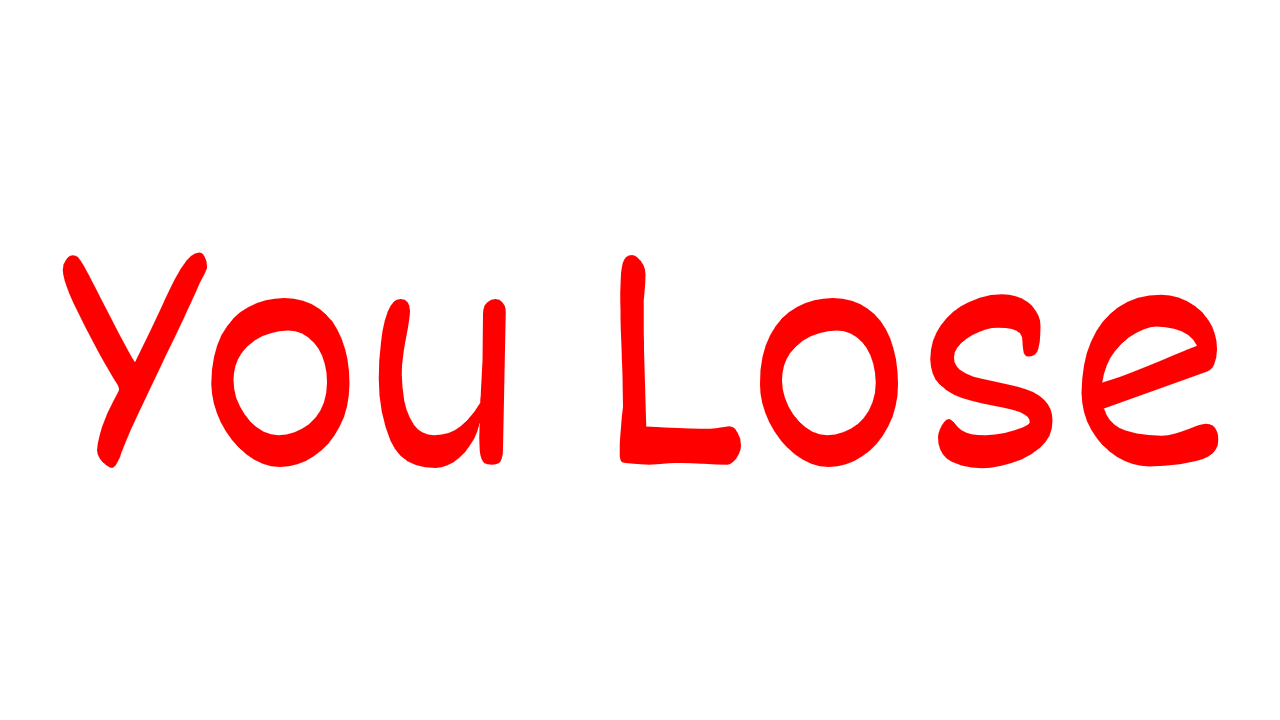
<style>
.page{position:relative;width:1280px;height:720px;background:#ffffff}
.page>*{position:absolute;margin:0}
.t1{font:350px "Dekko";color:#ff0000}
</style>
<div class="page">
<p class="t1" style="left:62px;top:252px;width:1157px;height:217px">You Lose</p>
</div>
